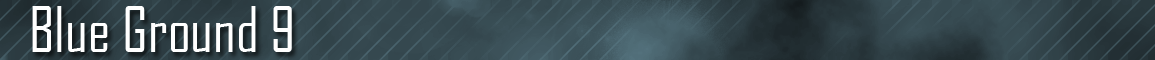
<style>
.page{position:relative;width:1155px;height:60px}
.page>*{position:absolute;margin:0}
.t1{font:60px "AgencyFB-Reg";color:#ffffff}
</style>
<div class="page">
<p class="t1" style="left:32px;top:6px;width:260px;height:46px">Blue Ground 9</p>
</div>
